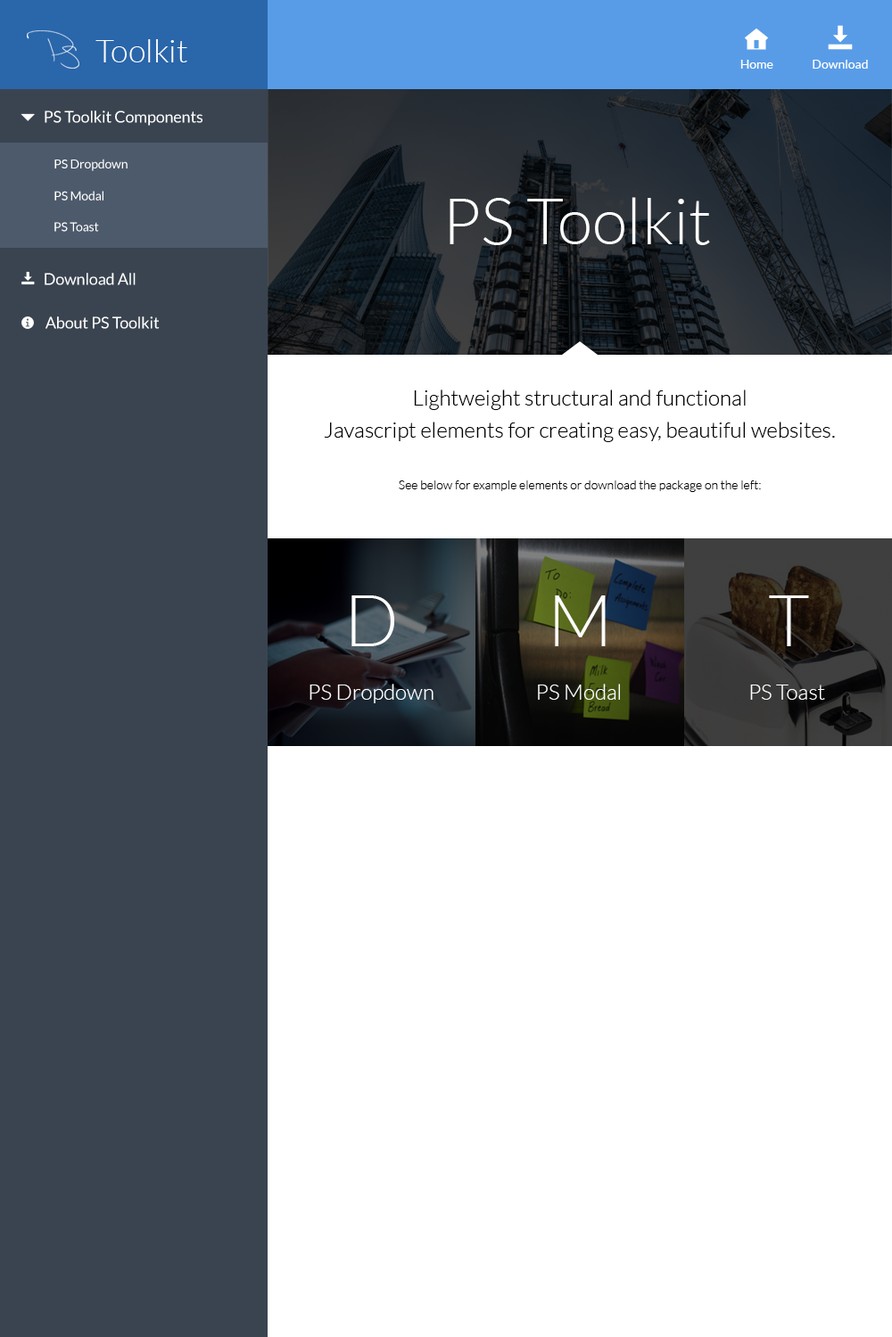
<style>
.page{position:relative;width:892px;height:1337px;background:#ffffff}
.page>*{position:absolute;margin:0}
.t1{font:32.1px "Lato-Light";color:#fdfdfd}
.t2{font:12.5px "Lato-Regular";color:#ffffff}
.t3{font:16px "Lato-Regular";letter-spacing:-0.01em;color:#ffffff}
.t4{font:12.5px "Lato-Regular";letter-spacing:-0.01em;color:#ffffff}
.t5{font:64.2px "Lato-Light";color:#ffffff}
.t6{font:21.4px/32.1px "Lato-Light";color:#000000}
.t7{font:12.5px "Lato-Light";color:#000000}
.t8{font:71.3px "Lato-Light";color:#fdfdfd}
.t9{font:21.4px "Lato-Light";color:#fdfdfd}
</style>
<div class="page">
<p class="t1" style="left:95px;top:39px;width:92px;height:23px">Toolkit</p>
<p class="t2" style="left:740px;top:60px;width:33px;height:9px">Home</p>
<p class="t2" style="left:812px;top:60px;width:56px;height:9px">Download</p>
<p class="t3" style="left:45px;top:111px;width:157px;height:15px">PS Toolkit Components</p>
<p class="t4" style="left:54px;top:159px;width:73px;height:12px">PS Dropdown</p>
<p class="t4" style="left:54px;top:191px;width:49px;height:10px">PS Modal</p>
<p class="t5" style="left:449px;top:197px;width:261px;height:48px">PS Toolkit</p>
<p class="t4" style="left:54px;top:222px;width:45px;height:10px">PS Toast</p>
<p class="t3" style="left:45px;top:273px;width:91px;height:12px">Download All</p>
<p class="t3" style="left:45px;top:317px;width:115px;height:12px">About PS Toolkit</p>
<p class="t6" style="left:324px;top:390px;width:511px;height:52px;text-align:center">Lightweight structural and functional<br>Javascript elements for creating easy, beautiful websites.</p>
<p class="t7" style="left:399px;top:481px;width:362px;height:11px">See below for example elements or download the package on the left:</p>
<p class="t8" style="left:351px;top:596px;width:43px;height:50px">D</p>
<p class="t8" style="left:555px;top:596px;width:50px;height:50px">M</p>
<p class="t8" style="left:769px;top:596px;width:40px;height:50px">T</p>
<p class="t9" style="left:309px;top:684px;width:124px;height:19px">PS Dropdown</p>
<p class="t9" style="left:538px;top:684px;width:82px;height:16px">PS Modal</p>
<p class="t9" style="left:750px;top:685px;width:75px;height:15px">PS Toast</p>
</div>
